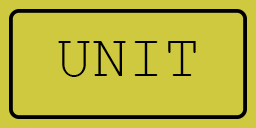
<style>
.page{position:relative;width:256px;height:128px;background:#cec93e}
.page>*{position:absolute;margin:0}
.t1{font:60px "CourierNewPSMT";color:#000000}
</style>
<div class="page">
<p class="t1" style="left:58px;top:41px;width:138px;height:36px">UNIT</p>
</div>
